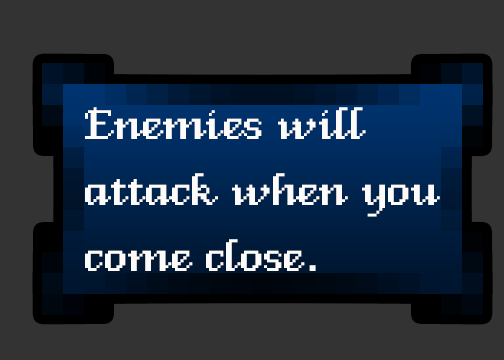
<style>
.page{position:relative;width:504px;height:360px;background:#333333}
.page>*{position:absolute;margin:0}
.t1{font:54.9px "VeniceClassic";color:#fdfafa}
</style>
<div class="page">
<p class="t1" style="left:85px;top:107px;width:355px;height:164px">Enemies will <br>attack when you <br>come close.</p>
</div>
